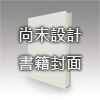
<style>
.page{position:relative;width:100px;height:100px}
.page>*{position:absolute;margin:0}
.t1{font:16px "MicrosoftJhengHeiBold";color:#eeeeee}
</style>
<div class="page">
<p class="t1" style="left:19px;top:27px;width:63px;height:44px">尚未設計<br>書籍封面</p>
</div>
